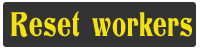
<style>
.page{position:relative;width:200px;height:50px;background:#333333}
.page>*{position:absolute;margin:0}
.t1{font:36px "Titania";letter-spacing:0.025em;color:#f4e112;scale:0.7 1}
</style>
<div class="page">
<p class="t1" style="left:11px;top:11px;width:181px;height:26px">Reset workers</p>
</div>
